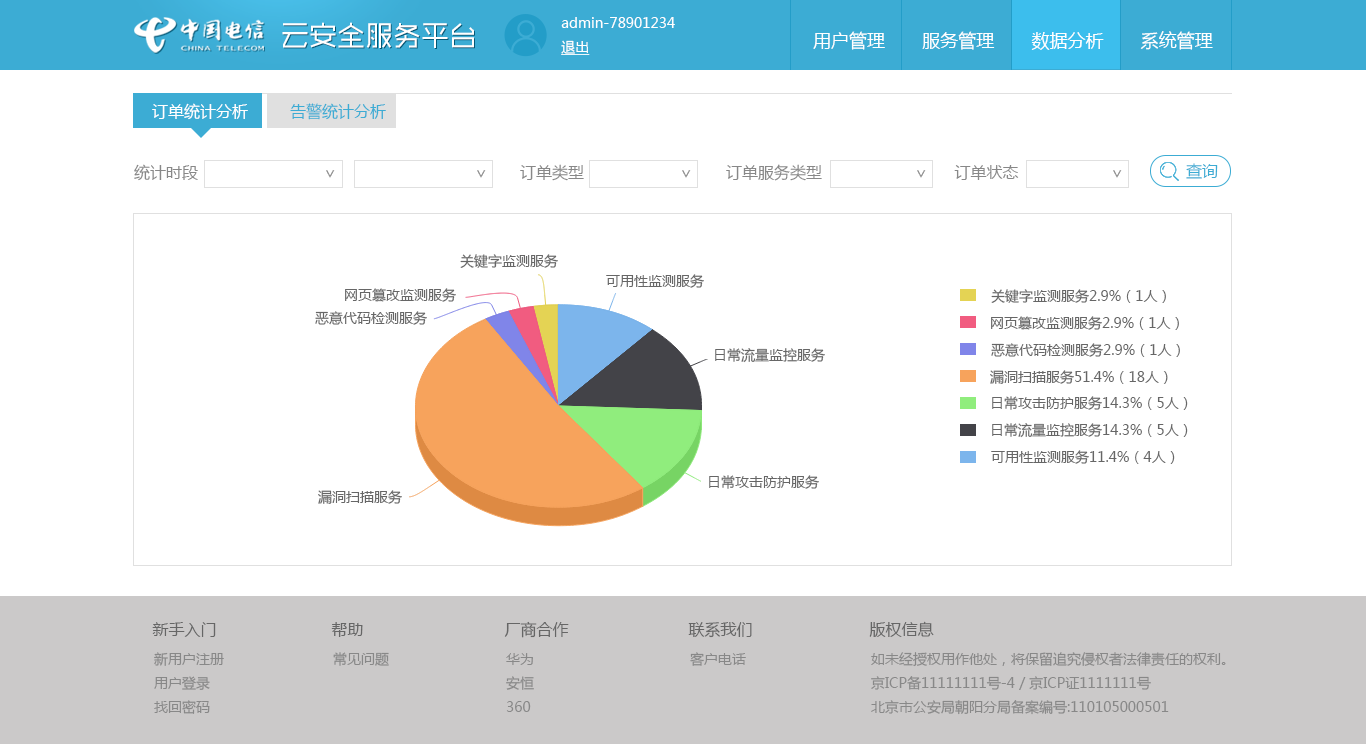
<style>
.page{position:relative;width:1366px;height:744px;background:#ffffff}
.page>*{position:absolute;margin:0}
.t1{font:14px/24px "MicrosoftYaHei";color:#ffffff}
.t2{font:14px/24px "MicrosoftYaHei";color:#ffffff;text-decoration:underline}
.t3{font:28px "MFShangHei_Noncommercial-Regular";color:#ffffff}
.t4{font:18px "MicrosoftYaHei";color:#ffffff}
.t5{font:16px "MicrosoftYaHei";color:#ffffff}
.t6{font:16px "MicrosoftYaHei";color:#3cacd4}
.t7{font:16px "MicrosoftYaHei";color:#888888}
.t8{font:14px "MicrosoftYaHei";color:#666666}
.t9{font:16px "MicrosoftYaHei";color:#666666}
.t10{font:14px/24px "MicrosoftYaHei";color:#888888}
.t11{font:14px "MicrosoftYaHei";color:#888888}
</style>
<div class="page">
<p class="t1" style="left:561px;top:17px;width:114px;height:38px">admin-78901234<br><span class="t2">退出</span></p>
<p class="t3" style="left:282px;top:22px;width:192px;height:26px">云安全服务平台</p>
<p class="t4" style="left:813px;top:31px;width:400px;height:19px">用户管理       服务管理       数据分析       系统管理</p>
<p class="t5" style="left:152px;top:103px;width:96px;height:17px">订单统计分析</p>
<p class="t6" style="left:290px;top:103px;width:96px;height:17px">告警统计分析</p>
<p class="t7" style="left:134px;top:164px;width:885px;height:17px">统计时段                                                                    订单类型                              订单服务类型                            订单状态</p>
<p class="t7" style="left:326px;top:170px;width:9px;height:8px">&gt;</p>
<p class="t7" style="left:477px;top:170px;width:9px;height:8px">&gt;</p>
<p class="t7" style="left:682px;top:170px;width:9px;height:8px">&gt;</p>
<p class="t7" style="left:917px;top:170px;width:9px;height:8px">&gt;</p>
<p class="t7" style="left:1113px;top:170px;width:9px;height:8px">&gt;</p>
<p class="t6" style="left:1186px;top:163px;width:32px;height:16px">查询</p>
<p class="t8" style="left:460px;top:254px;width:98px;height:14px">关键字监测服务</p>
<p class="t8" style="left:606px;top:274px;width:98px;height:14px">可用性监测服务</p>
<p class="t8" style="left:345px;top:288px;width:111px;height:14px">网页篡改监测服务</p>
<p class="t8" style="left:991px;top:289px;width:175px;height:14px">关键字监测服务2.9%（1人）</p>
<p class="t8" style="left:315px;top:311px;width:112px;height:14px">恶意代码检测服务</p>
<p class="t8" style="left:991px;top:316px;width:188px;height:14px">网页篡改监测服务2.9%（1人）</p>
<p class="t8" style="left:715px;top:348px;width:110px;height:15px">日常流量监控服务</p>
<p class="t8" style="left:991px;top:343px;width:189px;height:14px">恶意代码检测服务2.9%（1人）</p>
<p class="t8" style="left:990px;top:370px;width:178px;height:14px">漏洞扫描服务51.4%（18人）</p>
<p class="t8" style="left:992px;top:396px;width:196px;height:14px">日常攻击防护服务14.3%（5人）</p>
<p class="t8" style="left:992px;top:423px;width:196px;height:15px">日常流量监控服务14.3%（5人）</p>
<p class="t8" style="left:991px;top:450px;width:184px;height:14px">可用性监测服务11.4%（4人）</p>
<p class="t8" style="left:709px;top:475px;width:110px;height:14px">日常攻击防护服务</p>
<p class="t8" style="left:318px;top:490px;width:84px;height:14px">漏洞扫描服务</p>
<p class="t9" style="left:152px;top:622px;width:64px;height:15px">新手入门</p>
<p class="t9" style="left:331px;top:622px;width:32px;height:15px">帮助</p>
<p class="t9" style="left:504px;top:621px;width:65px;height:17px">厂商合作</p>
<p class="t9" style="left:688px;top:622px;width:64px;height:16px">联系我们</p>
<p class="t9" style="left:869px;top:621px;width:65px;height:16px">版权信息</p>
<p class="t10" style="left:154px;top:652px;width:70px;height:62px">新用户注册<br>用户登录<br>找回密码</p>
<p class="t11" style="left:333px;top:652px;width:56px;height:14px">常见问题</p>
<p class="t10" style="left:506px;top:653px;width:28px;height:59px">华为<br>安恒<br>360</p>
<p class="t11" style="left:690px;top:652px;width:56px;height:14px">客户电话</p>
<p class="t10" style="left:871px;top:652px;width:355px;height:63px">如未经授权用作他处，将保留追究侵权者法律责任的权利。<br>京ICP备11111111号-4 / 京ICP证1111111号<br>北京市公安局朝阳分局备案编号:110105000501</p>
</div>
